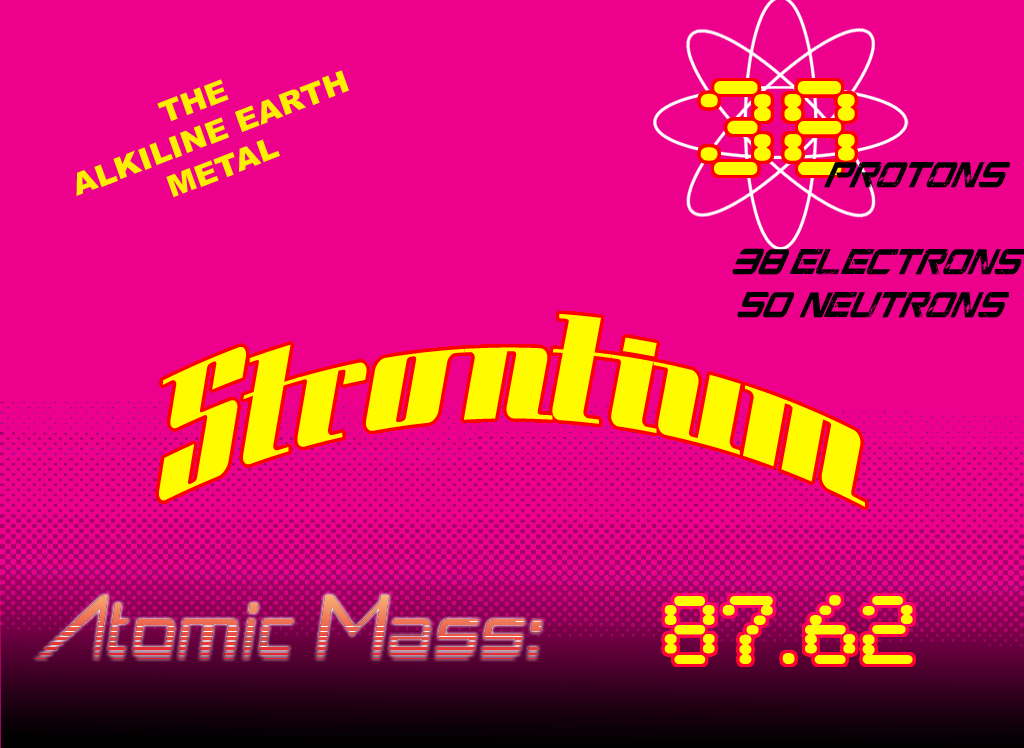
<style>
.page{position:relative;width:1024px;height:748px;background:#ed008c}
.page>*{position:absolute;margin:0}
.t1{font:30px "Arial-Black";color:#feef00;scale:1.04 1}
.t2{font:140px "SynchroLET";color:#fffc00}
.t3{font:39.4px "CGFLocustResistance";color:#000000;scale:0.67 1}
.t4{font:162.9px "SpaceCadetNF";color:#fffc00;scale:0.82 1}
.t5{font:100px "SynchroLET";color:#fffc00}
</style>
<div class="page">
<p class="t1" style="left:76px;top:70px;width:273px;height:128px;text-align:center;rotate:-21deg">THE <br>ALKILINE EARTH<br>METAL</p>
<p class="t2" style="left:700px;top:81px;width:155px;height:94px">38</p>
<p class="t3" style="left:732px;top:162px;width:294px;height:156px;text-align:center">ProtonS<br><br>38 electrons<br>    50  Neutrons</p>
<p class="t4" style="left:159px;top:314px;width:707px;height:193px">Strontium</p>
<p class="t5" style="left:664px;top:595px;width:249px;height:69px">87.62</p>
</div>
